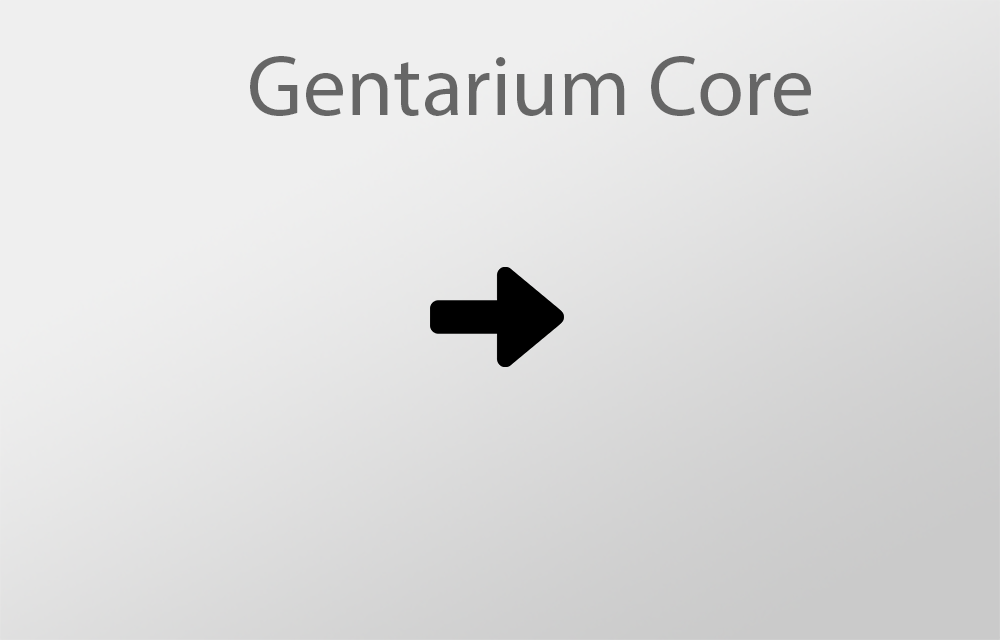
<style>
.page{position:relative;width:1000px;height:640px}
.page>*{position:absolute;margin:0}
.t1{font:85.7px "MyriadPro-Regular";color:#666666}
</style>
<div class="page">
<p class="t1" style="left:250px;top:56px;width:561px;height:60px">Gentarium Core</p>
</div>
